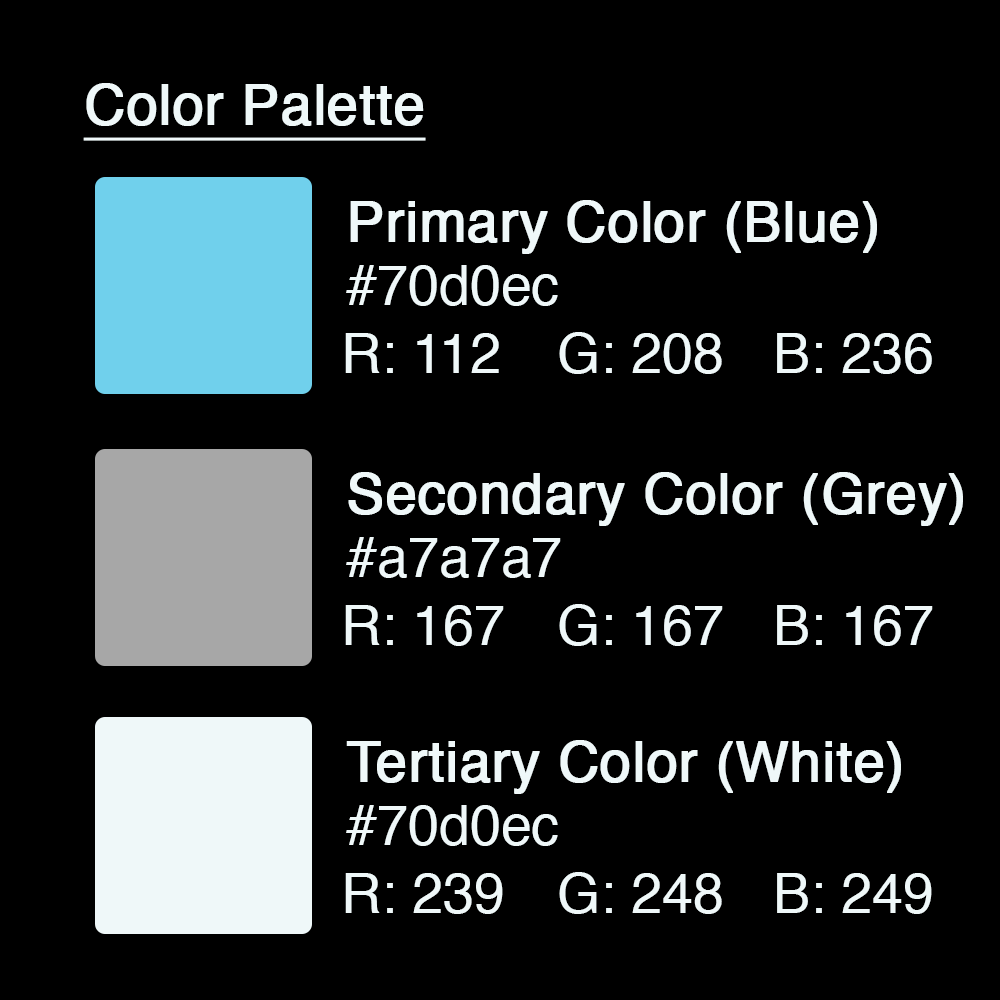
<style>
.page{position:relative;width:1000px;height:1000px;background:#000000}
.page>*{position:absolute;margin:0}
.t1{font:55.7px "Helvetica";color:#eff8f9;font-weight:bold;text-decoration:underline}
.t2{font:55.7px "Helvetica";color:#eff8f9;font-weight:bold}
.t3{font:55.7px "Helvetica";color:#eff8f9}
</style>
<div class="page">
<p class="t1" style="left:83px;top:83px;width:343px;height:58px">Color Palette</p>
<p class="t2" style="left:350px;top:200px;width:527px;height:54px">Primary Color (Blue)</p>
<p class="t3" style="left:346px;top:265px;width:212px;height:41px">#70d0ec</p>
<p class="t3" style="left:345px;top:332px;width:587px;height:42px">R: 112  G: 208  B: 236</p>
<p class="t2" style="left:348px;top:472px;width:615px;height:54px">Secondary Color (Grey)</p>
<p class="t3" style="left:346px;top:537px;width:215px;height:41px">#a7a7a7</p>
<p class="t3" style="left:345px;top:604px;width:588px;height:42px">R: 167  G: 167  B: 167</p>
<p class="t2" style="left:346px;top:740px;width:555px;height:54px">Tertiary Color (White)</p>
<p class="t3" style="left:346px;top:805px;width:212px;height:41px">#70d0ec</p>
<p class="t3" style="left:345px;top:872px;width:587px;height:42px">R: 239  G: 248  B: 249</p>
</div>
